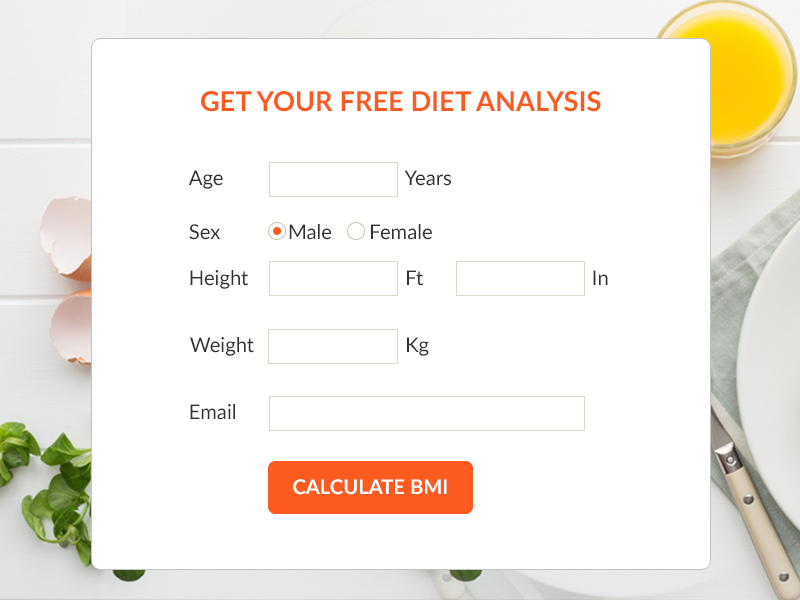
<style>
.page{position:relative;width:800px;height:600px;background:#ffffff}
.page>*{position:absolute;margin:0}
.t1{font:27.3px "Lato-Bold";color:#fb5b1f;text-transform:uppercase}
.t2{font:20.2px "Lato-Regular";color:#313131}
.t3{font:20.2px "Lato-Regular";color:#313131;text-transform:uppercase}
.t4{font:20.2px "Lato-Bold";color:#ffffff;text-transform:uppercase}
</style>
<div class="page">
<p class="t1" style="left:201px;top:91px;width:400px;height:21px">get your free diet analysis</p>
<p class="t2" style="left:188px;top:170px;width:35px;height:19px"><span class="t3">A</span>ge</p>
<p class="t2" style="left:404px;top:170px;width:47px;height:16px"><span class="t3">y</span>ears</p>
<p class="t2" style="left:189px;top:224px;width:31px;height:16px"><span class="t3">S</span>ex</p>
<p class="t2" style="left:289px;top:224px;width:43px;height:16px"><span class="t3">M</span>ale</p>
<p class="t2" style="left:371px;top:224px;width:61px;height:16px">Female</p>
<p class="t2" style="left:190px;top:270px;width:58px;height:19px">Height</p>
<p class="t2" style="left:407px;top:270px;width:16px;height:16px">Ft</p>
<p class="t2" style="left:593px;top:270px;width:15px;height:15px">In</p>
<p class="t2" style="left:190px;top:337px;width:64px;height:19px">Weight</p>
<p class="t2" style="left:407px;top:337px;width:22px;height:19px">Kg</p>
<p class="t2" style="left:190px;top:404px;width:45px;height:16px">Email</p>
<p class="t4" style="left:293px;top:479px;width:154px;height:16px">Calculate BMI</p>
</div>
